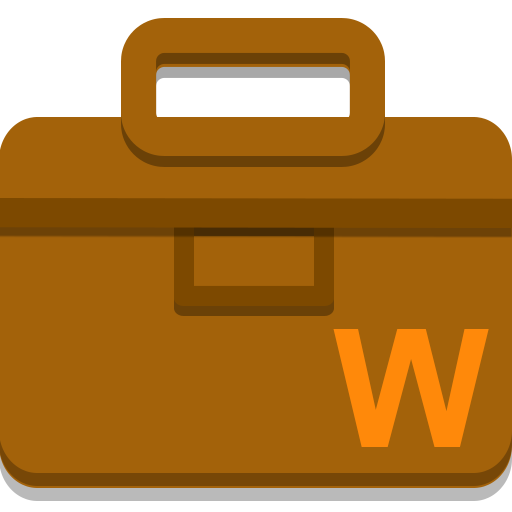
<style>
.page{position:relative;width:512px;height:512px;background:#a3620a}
.page>*{position:absolute;margin:0}
.t1{font:163.8px "Arial-BoldMT";letter-spacing:-0.025em;color:#ff890a}
</style>
<div class="page">
<p class="t1" style="left:333px;top:329px;width:156px;height:118px">W</p>
</div>
